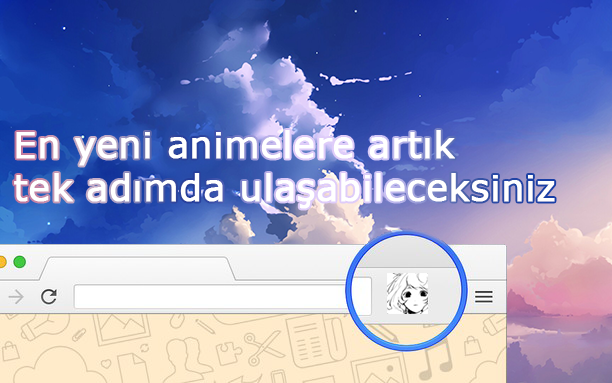
<style>
.page{position:relative;width:612px;height:383px}
.page>*{position:absolute;margin:0}
.t1{font:36px "Verdana";color:#ffffff;font-weight:bold}
</style>
<div class="page">
<p class="t1" style="left:14px;top:130px;width:541px;height:79px">En yeni animelere artık <br>tek adımda ulaşabileceksiniz</p>
</div>
